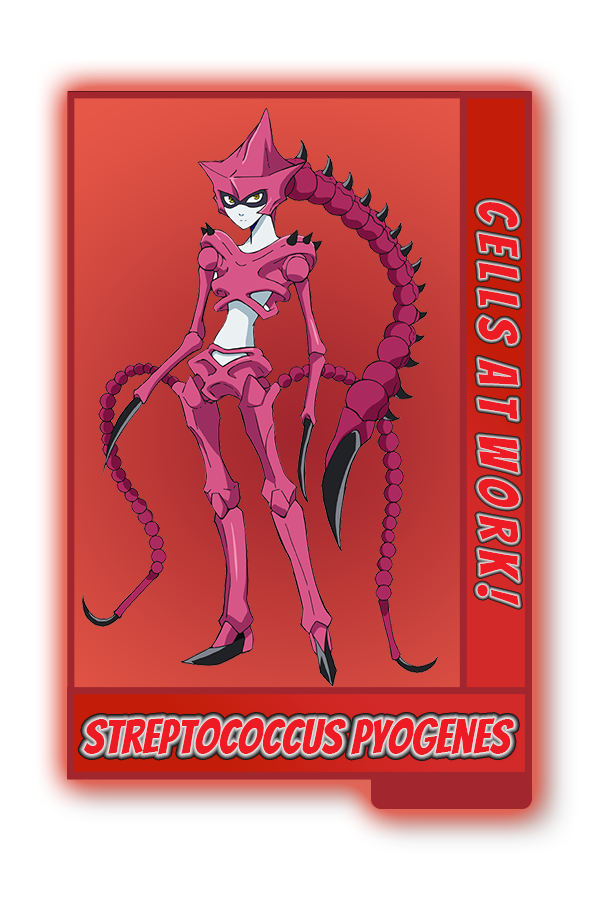
<style>
.page{position:relative;width:600px;height:900px;background:#ffffff}
.page>*{position:absolute;margin:0}
.t1{font:54px "Bangers-Regular";color:#ed1c24}
.t2{font:47.9px "Bangers-Regular";color:#ed1c24}
</style>
<div class="page">
<p class="t1" style="left:477px;top:202px;width:42px;height:404px;rotate:90deg">C e l l S  A t  W o r k !</p>
<p class="t2" style="left:83px;top:718px;width:431px;height:37px">Streptococcus pyogenes</p>
</div>
